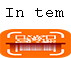
<style>
.page{position:relative;width:71px;height:58px;background:#ffffff}
.page>*{position:absolute;margin:0}
.t1{font:12px "CourierNewPSMT";color:#000000}
</style>
<div class="page">
<p class="t1" style="left:6px;top:8px;width:58px;height:9px">In tem</p>
</div>
